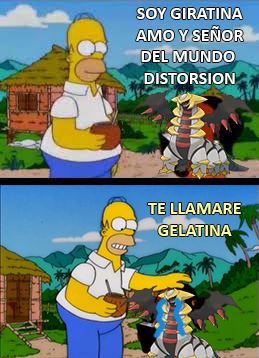
<style>
.page{position:relative;width:259px;height:358px}
.page>*{position:absolute;margin:0}
.t1{font:18px "Calibri-Bold";color:#ffffff}
.t2{font:18px "Calibri-Bold";color:#feff92}
</style>
<div class="page">
<p class="t1" style="left:136px;top:8px;width:108px;height:76px;text-align:center">SOY GIRATINA<br>AMO Y SEÑOR<br>DEL MUNDO <br>DISTORSION</p>
<p class="t2" style="left:148px;top:203px;width:93px;height:33px;text-align:center">TE LLAMARE<br>GELATINA</p>
</div>
